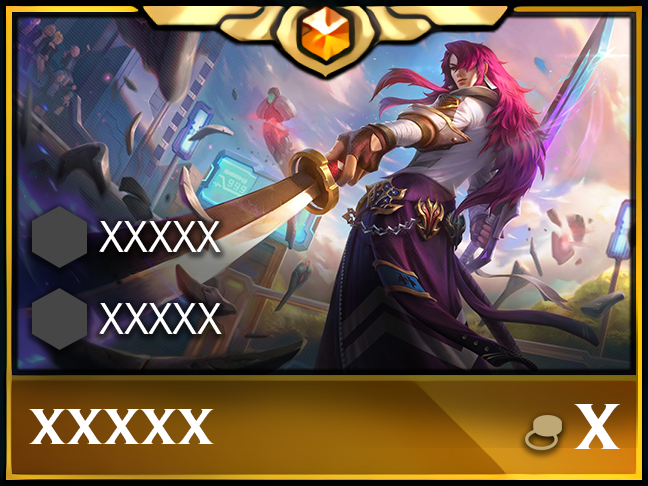
<style>
.page{position:relative;width:648px;height:486px}
.page>*{position:absolute;margin:0}
.t1{font:46.7px "Spiegel";color:#ffffff}
.t2{font:53.3px "BeaufortforLOL-Bold";color:#ffffff}
.t3{font:66.7px "BeaufortforLOL-Bold";color:#ffffff}
</style>
<div class="page">
<p class="t1" style="left:99px;top:221px;width:122px;height:31px">XXXXX</p>
<p class="t1" style="left:99px;top:303px;width:123px;height:31px">XXXXX</p>
<p class="t2" style="left:29px;top:409px;width:185px;height:35px">XXXXX</p>
<p class="t3" style="left:574px;top:404px;width:46px;height:45px">X</p>
</div>
